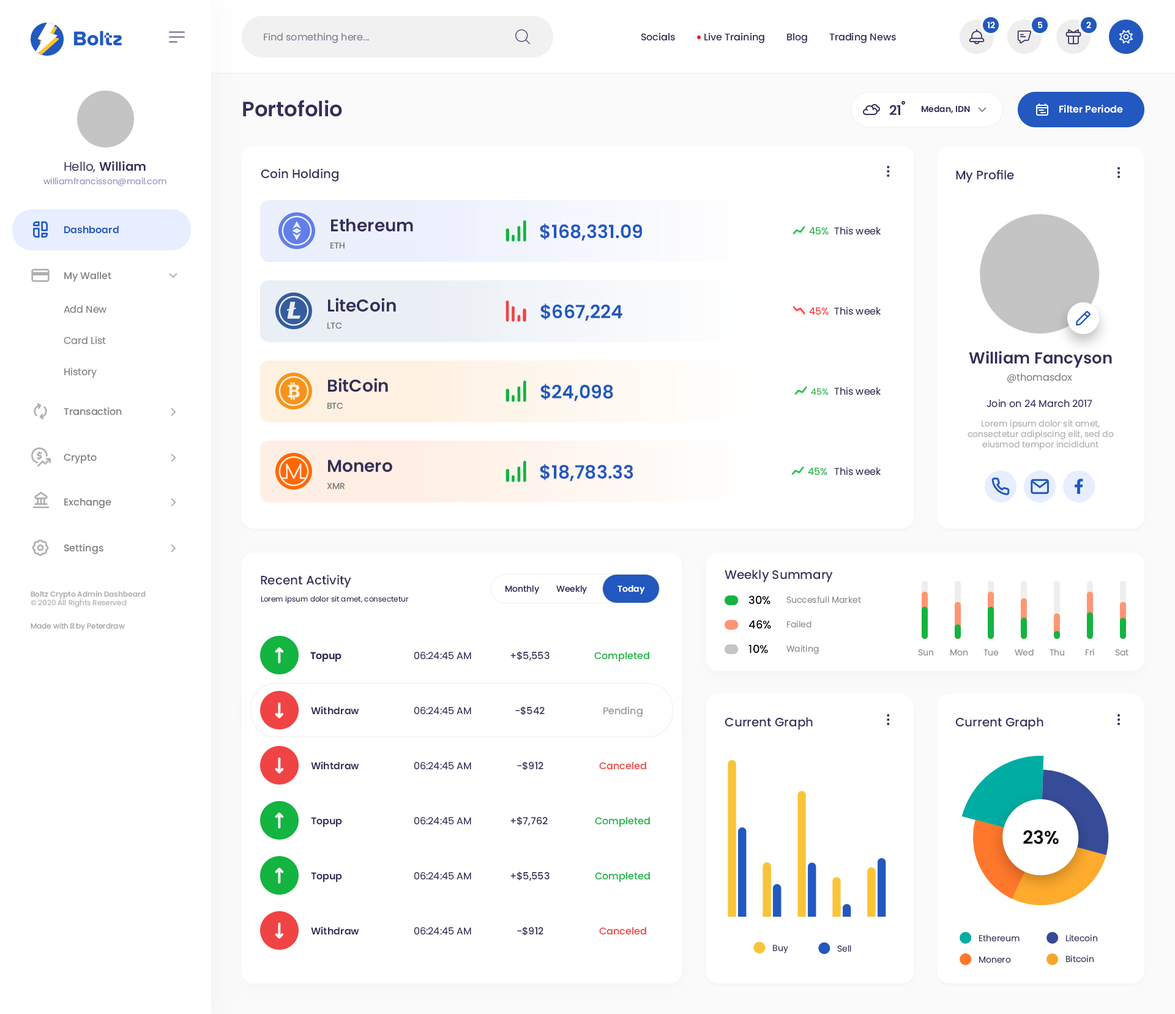
<style>
.page{position:relative;width:1175px;height:1014px;background:#ffffff}
.page>*{position:absolute;margin:0}
.t1{font:8.6px "Poppins-SemiBold";color:#ffffff}
.t2{font:9.8px "Poppins-Regular";color:#868295}
.t3{font:9.8px "Poppins-Medium";color:#342e59}
.t4{font:20.8px "Poppins-SemiBold";color:#342e59}
.t5{font:13.5px "Poppins-SemiBold";color:#342e59}
.t6{font:8.6px "Poppins-SemiBold";color:#342e59}
.t7{font:9.8px "Poppins-SemiBold";color:#ffffff}
.t8{font:12.2px "Poppins-SemiBold";color:#342e59}
.t9{font:12.2px "Poppins-Regular";color:#342e59}
.t10{font:12.2px "Poppins-Medium";color:#342e59}
.t11{font:8.6px "Poppins-Regular";color:#9b94c1}
.t12{font:17.1px "Poppins-SemiBold";color:#342e59}
.t13{font:9.8px "Poppins-SemiBold";color:#2258bf}
.t14{font:18.4px "Poppins-SemiBold";color:#2258bf}
.t15{font:9.8px "Poppins-Regular";color:#13b440}
.t16{font:9.8px "Poppins-Regular";color:#342e59}
.t17{font:8.6px "Poppins-Medium";color:#818181}
.t18{font:9.8px "Poppins-Medium";color:#818181}
.t19{font:9.8px "Poppins-Regular";color:#818181}
.t20{font:9.8px "Poppins-Regular";color:#ff2e2e}
.t21{font:15.9px "Poppins-SemiBold";color:#342e59}
.t22{font:8.6px "Poppins-Regular";color:#13b440}
.t23{font:8.6px "Poppins-Regular";color:#afafaf}
.t24{font:7.3px "Poppins-SemiBold";color:#afafaf}
.t25{font:7.3px "Poppins-Regular";color:#afafaf}
.t26{font:8.6px "Poppins-Medium";color:#342e59}
.t27{font:7.3px "Poppins-Regular";color:#342e59}
.t28{font:11px "Poppins-Medium";color:#000000}
.t29{font:8.6px "Poppins-Regular";color:#8d8d8d}
.t30{font:7.3px "Poppins-Regular";color:#969ba0}
.t31{font:9.8px "Poppins-SemiBold";color:#342e59}
.t32{font:9.8px "Poppins-Medium";color:#13b440}
.t33{font:9.8px "Poppins-Medium";color:#9c9c9c}
.t34{font:9.8px "Poppins-Medium";color:#f04444}
.t35{font:18.4px "Poppins-SemiBold";color:#000000}
.t36{font:8.6px "Poppins-Regular";color:#342e59}
</style>
<div class="page">
<p class="t1" style="left:988px;top:21px;width:7px;height:8px">12</p>
<p class="t1" style="left:1038px;top:21px;width:5px;height:8px">5</p>
<p class="t1" style="left:1087px;top:21px;width:5px;height:7px">2</p>
<p class="t2" style="left:264px;top:32px;width:105px;height:11px">Find something here...</p>
<p class="t3" style="left:642px;top:32px;width:33px;height:9px">Socials</p>
<p class="t3" style="left:705px;top:32px;width:60px;height:11px">Live Training</p>
<p class="t3" style="left:787px;top:33px;width:21px;height:10px">Blog</p>
<p class="t3" style="left:830px;top:32px;width:66px;height:11px">Trading News</p>
<p class="t4" style="left:243px;top:100px;width:99px;height:17px">Portofolio</p>
<p class="t5" style="left:890px;top:105px;width:11px;height:10px">21</p>
<p class="t6" style="left:921px;top:105px;width:49px;height:9px">Medan, IDN</p>
<p class="t7" style="left:1060px;top:105px;width:63px;height:8px">Filter Periode</p>
<p class="t8" style="left:64px;top:161px;width:82px;height:12px"><span class="t9">Hello, </span>William</p>
<p class="t10" style="left:261px;top:168px;width:78px;height:14px">Coin Holding</p>
<p class="t10" style="left:956px;top:170px;width:58px;height:13px">My Profile</p>
<p class="t11" style="left:43px;top:178px;width:124px;height:8px">williamfrancisson@mail.com</p>
<p class="t12" style="left:331px;top:219px;width:82px;height:13px">Ethereum</p>
<p class="t13" style="left:64px;top:226px;width:55px;height:8px">Dashboard</p>
<p class="t14" style="left:540px;top:223px;width:102px;height:18px">$168,331.09</p>
<p class="t15" style="left:809px;top:227px;width:20px;height:8px">45%</p>
<p class="t16" style="left:834px;top:227px;width:48px;height:8px">This week</p>
<p class="t17" style="left:330px;top:242px;width:15px;height:7px">ETH</p>
<p class="t18" style="left:64px;top:272px;width:47px;height:10px">My Wallet</p>
<p class="t19" style="left:64px;top:305px;width:43px;height:8px">Add New</p>
<p class="t12" style="left:328px;top:298px;width:68px;height:14px">LiteCoin</p>
<p class="t14" style="left:541px;top:304px;width:82px;height:17px">$667,224</p>
<p class="t20" style="left:809px;top:307px;width:20px;height:8px">45%</p>
<p class="t16" style="left:834px;top:307px;width:48px;height:8px">This week</p>
<p class="t17" style="left:327px;top:323px;width:15px;height:6px">LTC</p>
<p class="t19" style="left:64px;top:336px;width:42px;height:9px">Card List</p>
<p class="t21" style="left:969px;top:351px;width:143px;height:17px">William Fancyson</p>
<p class="t19" style="left:64px;top:367px;width:33px;height:11px">History</p>
<p class="t19" style="left:1008px;top:373px;width:65px;height:10px">@thomasdox</p>
<p class="t12" style="left:328px;top:378px;width:60px;height:14px">BitCoin</p>
<p class="t14" style="left:541px;top:384px;width:72px;height:18px">$24,098</p>
<p class="t22" style="left:811px;top:388px;width:18px;height:7px">45%</p>
<p class="t16" style="left:834px;top:387px;width:48px;height:8px">This week</p>
<p class="t16" style="left:987px;top:399px;width:106px;height:9px">Join on 24 March 2017</p>
<p class="t18" style="left:64px;top:407px;width:58px;height:9px">Transaction</p>
<p class="t17" style="left:327px;top:403px;width:16px;height:7px">BTC</p>
<p class="t23" style="left:968px;top:420px;width:146px;height:30px;text-align:center">Lorem ipsum dolor sit amet, consectetur adipiscing elit, sed do eiusmod tempor incididunt</p>
<p class="t18" style="left:64px;top:454px;width:33px;height:10px">Crypto</p>
<p class="t12" style="left:328px;top:460px;width:64px;height:13px">Monero</p>
<p class="t14" style="left:540px;top:464px;width:94px;height:18px">$18,783.33</p>
<p class="t15" style="left:808px;top:468px;width:20px;height:8px">45%</p>
<p class="t16" style="left:834px;top:467px;width:48px;height:9px">This week</p>
<p class="t17" style="left:327px;top:483px;width:18px;height:7px">XMR</p>
<p class="t18" style="left:64px;top:498px;width:47px;height:11px">Exchange</p>
<p class="t18" style="left:64px;top:544px;width:39px;height:11px">Settings</p>
<p class="t10" style="left:725px;top:570px;width:108px;height:13px">Weekly Summary</p>
<p class="t10" style="left:261px;top:575px;width:90px;height:13px">Recent Activity</p>
<p class="t24" style="left:31px;top:591px;width:115px;height:17px">Boltz Crypto Admin Dashboard<br><span class="t25">© 2020 All Rights Reserved</span></p>
<p class="t26" style="left:505px;top:585px;width:34px;height:9px">Monthly</p>
<p class="t26" style="left:557px;top:585px;width:30px;height:9px">Weekly</p>
<p class="t1" style="left:618px;top:585px;width:27px;height:9px">Today</p>
<p class="t27" style="left:261px;top:596px;width:148px;height:8px">Lorem ipsum dolor sit amet, consectetur</p>
<p class="t28" style="left:749px;top:596px;width:22px;height:9px">30%</p>
<p class="t29" style="left:787px;top:596px;width:74px;height:8px">Succesfull Market</p>
<p class="t30" style="left:31px;top:623px;width:94px;height:8px">Made with ♥ by Peterdraw</p>
<p class="t28" style="left:749px;top:620px;width:22px;height:9px">46%</p>
<p class="t29" style="left:787px;top:621px;width:25px;height:7px">Failed</p>
<p class="t31" style="left:310px;top:652px;width:32px;height:10px">Topup</p>
<p class="t31" style="left:310px;top:652px;width:32px;height:10px">Topup</p>
<p class="t16" style="left:414px;top:652px;width:57px;height:8px">06:24:45 AM</p>
<p class="t3" style="left:511px;top:651px;width:39px;height:10px">+$5,553</p>
<p class="t32" style="left:594px;top:652px;width:56px;height:10px">Completed</p>
<p class="t28" style="left:749px;top:645px;width:19px;height:9px">10%</p>
<p class="t29" style="left:787px;top:645px;width:32px;height:9px">Waiting</p>
<p class="t29" style="left:918px;top:650px;width:16px;height:6px">Sun</p>
<p class="t29" style="left:951px;top:650px;width:18px;height:6px">Mon</p>
<p class="t29" style="left:984px;top:650px;width:15px;height:6px">Tue</p>
<p class="t29" style="left:1015px;top:649px;width:19px;height:7px">Wed</p>
<p class="t29" style="left:1050px;top:649px;width:15px;height:7px">Thu</p>
<p class="t29" style="left:1086px;top:649px;width:9px;height:7px">Fri</p>
<p class="t29" style="left:1115px;top:650px;width:14px;height:6px">Sat</p>
<p class="t31" style="left:311px;top:706px;width:48px;height:9px">Withdraw</p>
<p class="t16" style="left:414px;top:707px;width:57px;height:8px">06:24:45 AM</p>
<p class="t3" style="left:515px;top:706px;width:30px;height:10px">-$542</p>
<p class="t33" style="left:604px;top:706px;width:39px;height:12px">Pending</p>
<p class="t10" style="left:725px;top:718px;width:88px;height:12px">Current Graph</p>
<p class="t10" style="left:956px;top:718px;width:88px;height:12px">Current Graph</p>
<p class="t31" style="left:311px;top:762px;width:48px;height:8px">Wihtdraw</p>
<p class="t3" style="left:517px;top:762px;width:27px;height:9px">-$912</p>
<p class="t16" style="left:414px;top:762px;width:57px;height:8px">06:24:45 AM</p>
<p class="t34" style="left:599px;top:762px;width:48px;height:8px">Canceled</p>
<p class="t31" style="left:311px;top:817px;width:31px;height:11px">Topup</p>
<p class="t16" style="left:414px;top:817px;width:57px;height:8px">06:24:45 AM</p>
<p class="t3" style="left:511px;top:817px;width:37px;height:9px">+$7,762</p>
<p class="t32" style="left:595px;top:817px;width:55px;height:11px">Completed</p>
<p class="t35" style="left:1024px;top:830px;width:35px;height:15px">23%</p>
<p class="t31" style="left:311px;top:872px;width:31px;height:11px">Topup</p>
<p class="t16" style="left:414px;top:872px;width:57px;height:8px">06:24:45 AM</p>
<p class="t3" style="left:511px;top:872px;width:39px;height:10px">+$5,553</p>
<p class="t32" style="left:595px;top:872px;width:55px;height:11px">Completed</p>
<p class="t31" style="left:311px;top:927px;width:48px;height:8px">Withdraw</p>
<p class="t16" style="left:414px;top:928px;width:57px;height:7px">06:24:45 AM</p>
<p class="t3" style="left:517px;top:927px;width:27px;height:9px">-$912</p>
<p class="t34" style="left:599px;top:928px;width:48px;height:7px">Canceled</p>
<p class="t36" style="left:980px;top:935px;width:40px;height:7px">Ethereum</p>
<p class="t36" style="left:1066px;top:935px;width:32px;height:7px">Litecoin</p>
<p class="t36" style="left:773px;top:945px;width:16px;height:9px">Buy</p>
<p class="t36" style="left:838px;top:945px;width:14px;height:8px">Sell</p>
<p class="t36" style="left:980px;top:957px;width:31px;height:7px">Monero</p>
<p class="t36" style="left:1066px;top:956px;width:29px;height:7px">Bitcoin</p>
</div>
